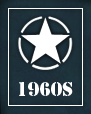
<style>
.page{position:relative;width:91px;height:114px}
.page>*{position:absolute;margin:0}
.t1{font:18px "StencilStd";color:#ffffff}
</style>
<div class="page">
<p class="t1" style="left:19px;top:82px;width:54px;height:14px">1960s</p>
</div>
